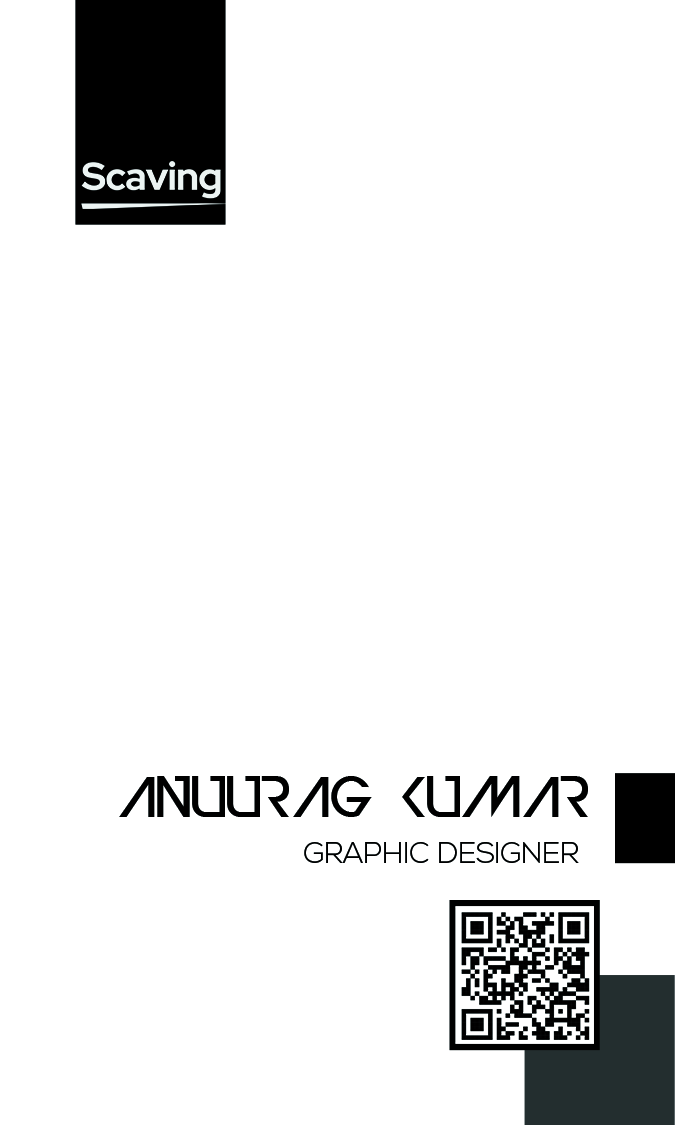
<style>
.page{position:relative;width:675px;height:1125px;background:#ffffff}
.page>*{position:absolute;margin:0}
.t1{font:54.2px "DevilBreezeMedium";color:#000000;text-transform:uppercase}
.t2{font:29.2px "NexaLight";color:#000000;text-transform:uppercase}
</style>
<div class="page">
<p class="t1" style="left:119px;top:776px;width:469px;height:41px">ANUURAG Kumar</p>
<p class="t2" style="left:304px;top:842px;width:275px;height:21px">graphic designer</p>
</div>
